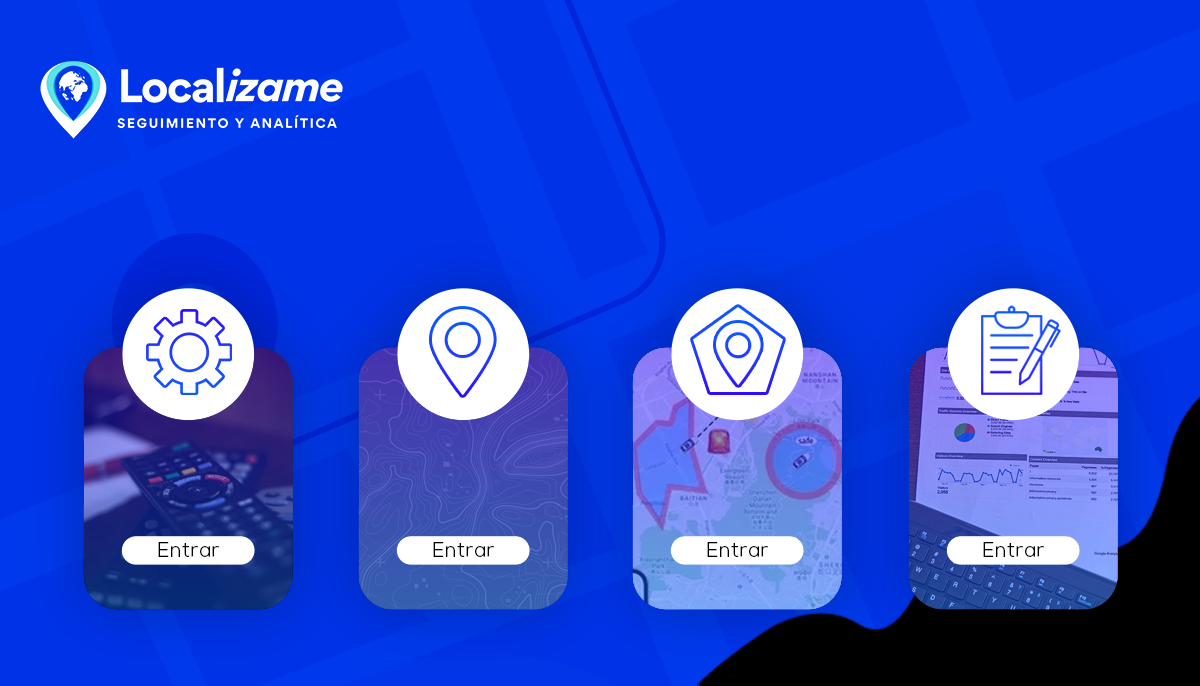
<style>
.page{position:relative;width:1200px;height:686px;background:#0033e8}
.page>*{position:absolute;margin:0}
.t1{font:20.7px "FONTSPRINGDEMO-ArtegraSansAltLightRegular";color:#000000}
</style>
<div class="page">
<p class="t1" style="left:158px;top:542px;width:62px;height:15px">Entrar</p>
<p class="t1" style="left:433px;top:542px;width:62px;height:15px">Entrar</p>
<p class="t1" style="left:707px;top:542px;width:62px;height:15px">Entrar</p>
<p class="t1" style="left:983px;top:542px;width:62px;height:15px">Entrar</p>
</div>
